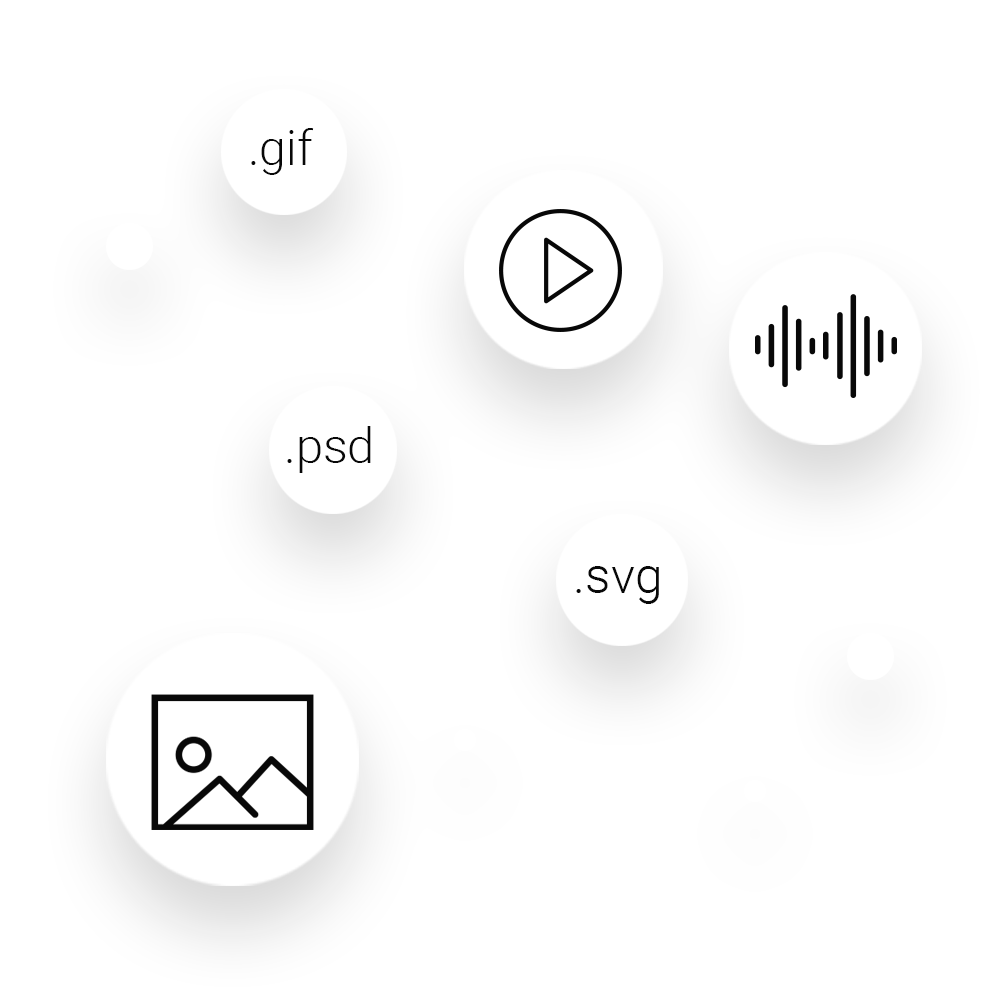
<style>
.page{position:relative;width:1000px;height:1000px;background:#ffffff}
.page>*{position:absolute;margin:0}
.t1{font:47.9px "Roboto-Light";color:#000000}
.t2{font:48.7px "Roboto-Light";color:#000000}
.t3{font:50.2px "Roboto-Light";color:#000000}
</style>
<div class="page">
<p class="t1" style="left:251px;top:128px;width:63px;height:47px">.gif</p>
<p class="t2" style="left:287px;top:426px;width:84px;height:47px">.psd</p>
<p class="t3" style="left:576px;top:566px;width:83px;height:38px">.svg</p>
</div>
